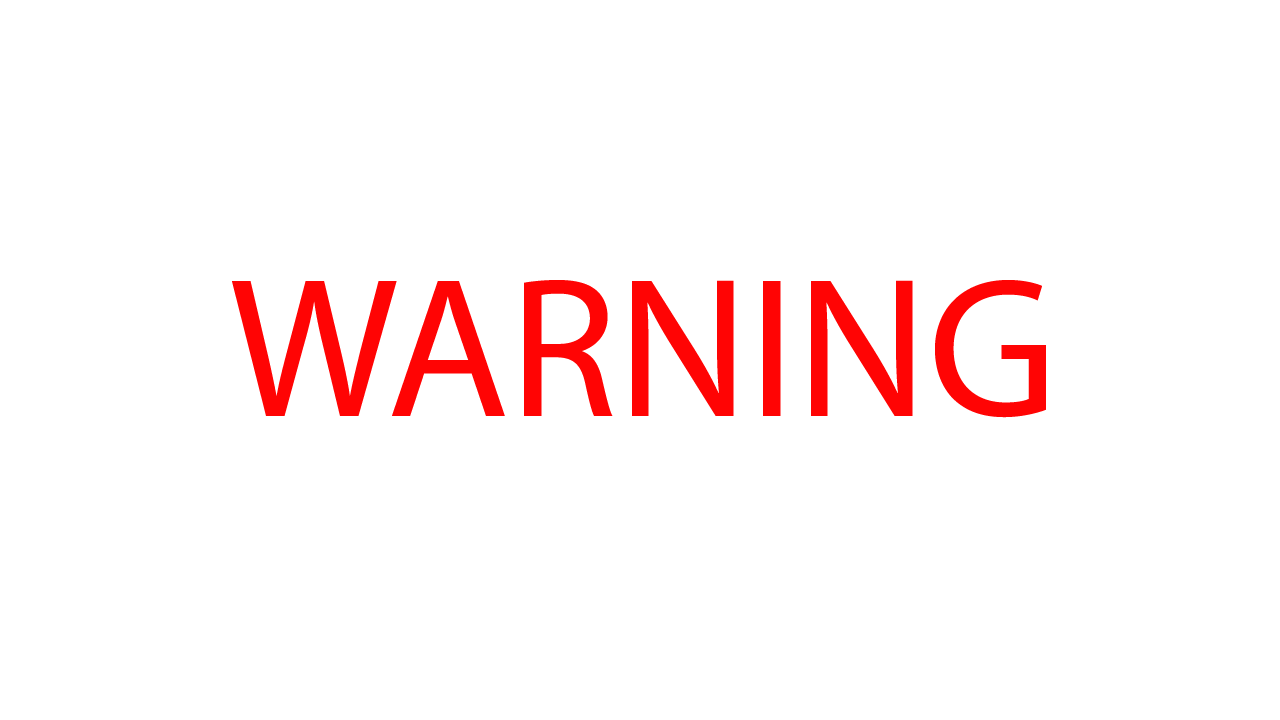
<style>
.page{position:relative;width:1280px;height:720px;background:#ffffff}
.page>*{position:absolute;margin:0}
.t1{font:200px "MyriadPro-Regular";color:#ff0404}
</style>
<div class="page">
<p class="t1" style="left:232px;top:280px;width:814px;height:138px">WARNING</p>
</div>
